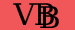
<style>
.page{position:relative;width:75px;height:30px;background:#f15758}
.page>*{position:absolute;margin:0}
.t1{font:30px "BitstreamVeraSerif-Roman";color:#000000}
</style>
<div class="page">
<p class="t1" style="left:13px;top:3px;width:23px;height:22px">V</p>
<p class="t1" style="left:35px;top:3px;width:19px;height:22px">B</p>
<p class="t1" style="left:40px;top:6px;width:19px;height:22px">B</p>
</div>
